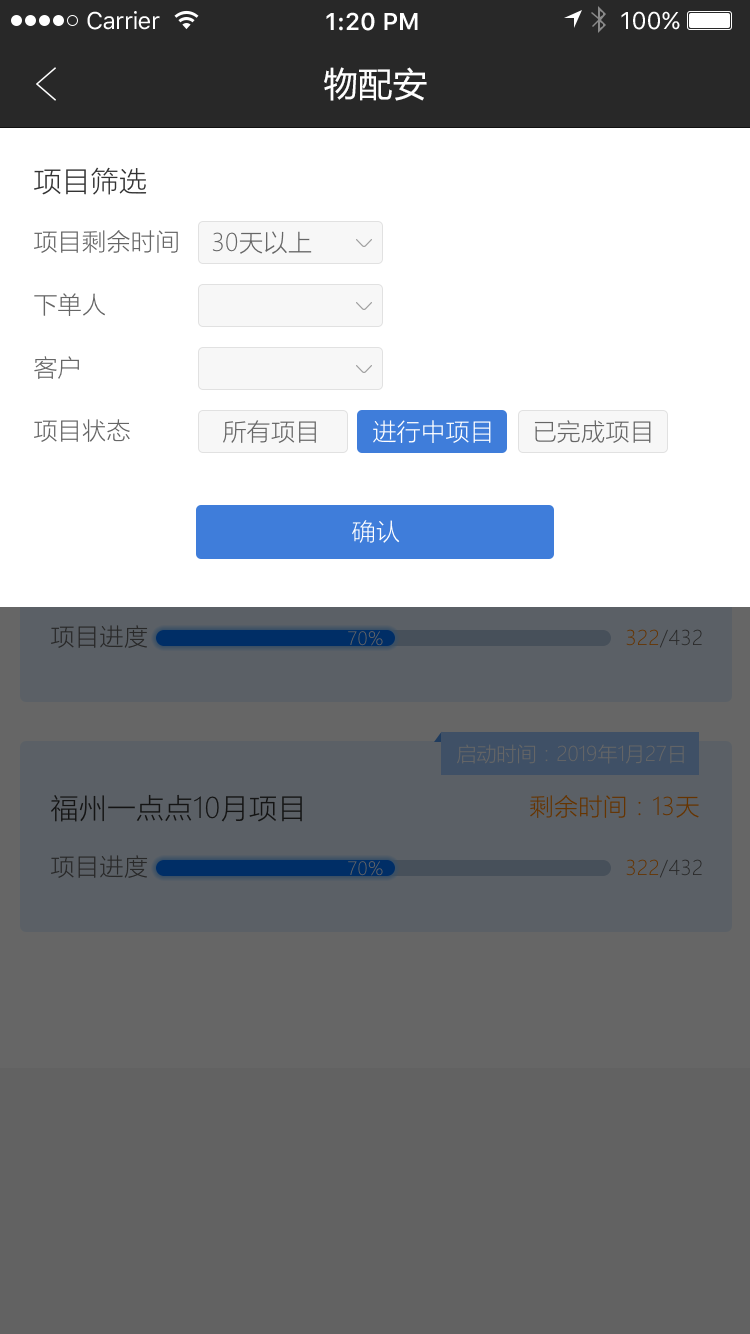
<style>
.page{position:relative;width:750px;height:1334px;background:#ffffff}
.page>*{position:absolute;margin:0}
.t1{font:24px "SFUIText-Regular";letter-spacing:-0.025em;color:#ffffff}
.t2{font:24px "SFUIText-Semibold";color:#ffffff}
.t3{font:24px "SFUIText-Regular";color:#ffffff}
.t4{font:34px "MicrosoftYaHei";letter-spacing:0.02em;color:#ffffff}
.t5{font:28px "MicrosoftYaHeiLight";letter-spacing:0.02em;color:#333333}
.t6{font:24px "MicrosoftYaHeiLight";letter-spacing:0.02em;color:#666666}
.t7{font:24px "MicrosoftYaHeiLight";letter-spacing:0.02em;color:#ffffff}
.t8{font:24px "MicrosoftYaHeiLight";letter-spacing:0.02em;color:#292929}
.t9{font:20px "MicrosoftYaHeiLight";letter-spacing:0.02em}
.t10{font:18px "MicrosoftYaHeiLight";letter-spacing:0.02em}
.t11{font:20px "MicrosoftYaHeiLight";color:#666666}
.t12{font:28px "MicrosoftYaHeiLight";letter-spacing:0.02em;color:#141414}
.t13{font:24px "MicrosoftYaHeiLight";letter-spacing:0.02em;color:#663400}
</style>
<div class="page">
<p class="t1" style="left:87px;top:11px;width:73px;height:19px">Carrier</p>
<p class="t2" style="left:326px;top:12px;width:92px;height:19px">1:20 PM</p>
<p class="t3" style="left:621px;top:11px;width:59px;height:19px">100%</p>
<p class="t4" style="left:324px;top:67px;width:103px;height:34px">物配安</p>
<p class="t5" style="left:34px;top:167px;width:113px;height:28px">项目筛选</p>
<p class="t6" style="left:34px;top:230px;width:144px;height:23px">项目剩余时间</p>
<p class="t6" style="left:212px;top:231px;width:100px;height:23px">30天以上</p>
<p class="t6" style="left:34px;top:293px;width:71px;height:23px">下单人</p>
<p class="t6" style="left:34px;top:356px;width:45px;height:23px">客户</p>
<p class="t6" style="left:34px;top:419px;width:96px;height:23px">项目状态</p>
<p class="t6" style="left:223px;top:420px;width:93px;height:23px">所有项目</p>
<p class="t7" style="left:373px;top:420px;width:118px;height:23px">进行中项目</p>
<p class="t6" style="left:534px;top:420px;width:117px;height:23px">已完成项目</p>
<p class="t7" style="left:352px;top:520px;width:48px;height:23px">确认</p>
<p class="t8" style="left:51px;top:625px;width:97px;height:23px">项目进度</p>
<p class="t9" style="left:626px;top:629px;width:76px;height:19px">322/432</p>
<p class="t10" style="left:348px;top:631px;width:35px;height:15px">70%</p>
<p class="t11" style="left:457px;top:744px;width:227px;height:20px">启动时间：2019年1月27日</p>
<p class="t12" style="left:51px;top:794px;width:251px;height:28px">福州一点点10月项目</p>
<p class="t13" style="left:530px;top:795px;width:169px;height:23px">剩余时间：13天</p>
<p class="t8" style="left:51px;top:855px;width:97px;height:23px">项目进度</p>
<p class="t10" style="left:348px;top:861px;width:35px;height:15px">70%</p>
<p class="t9" style="left:626px;top:859px;width:76px;height:19px">322/432</p>
</div>
